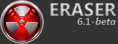
<style>
.page{position:relative;width:118px;height:44px;background:#333333}
.page>*{position:absolute;margin:0}
.t1{font:18.4px "SegoeUI-Bold"}
.t2{font:10px "SegoeUI-Bold";color:#a2a2a2}
.t3{font:10px "SegoeUI-BoldItalic";color:#a2a2a2}
</style>
<div class="page">
<p class="t1" style="left:50px;top:2px;width:67px;height:15px">ERASER</p>
<p class="t2" style="left:77px;top:17px;width:39px;height:8px">6.1-<span class="t3">beta</span></p>
</div>
